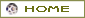
<style>
.page{position:relative;width:85px;height:18px;background:#ffffff}
.page>*{position:absolute;margin:0}
.t1{font:9.5px "BenguiatGothicITCbyBT-Book";letter-spacing:-0.01em;color:#6a7014;font-weight:bold;scale:1.77 1}
</style>
<div class="page">
<p class="t1" style="left:25px;top:6px;width:44px;height:6px">HOME</p>
</div>
